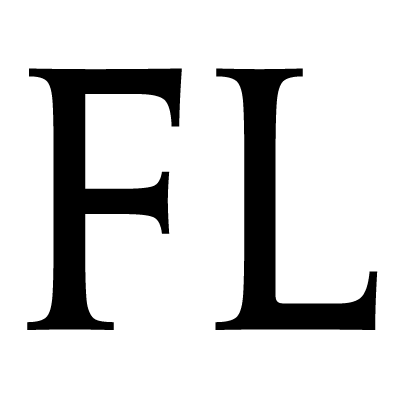
<style>
.page{position:relative;width:400px;height:400px;background:#ffffff}
.page>*{position:absolute;margin:0}
.t1{font:333.3px "PenumbraWebPro-Serif";color:#000000}
</style>
<div class="page">
<p class="t1" style="left:27px;top:68px;width:351px;height:262px">FL</p>
</div>
